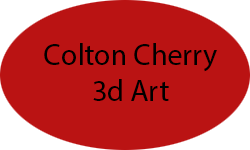
<style>
.page{position:relative;width:250px;height:150px;background:#ba1313}
.page>*{position:absolute;margin:0}
.t1{font:30px "MyriadPro-Regular";color:#000000}
</style>
<div class="page">
<p class="t1" style="left:44px;top:43px;width:173px;height:58px;text-align:center">Colton Cherry<br>3d Art</p>
</div>
